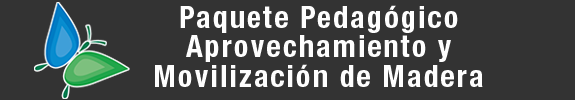
<style>
.page{position:relative;width:575px;height:100px;background:#333333}
.page>*{position:absolute;margin:0}
.t1{font:30px/29.6px "HelveticaNeue-BoldCond";letter-spacing:0.075em;color:#fefefe}
</style>
<div class="page">
<p class="t1" style="left:155px;top:5px;width:328px;height:82px;text-align:center">Paquete Pedagógico<br>Aprovechamiento y<br>Movilización de Madera</p>
</div>
